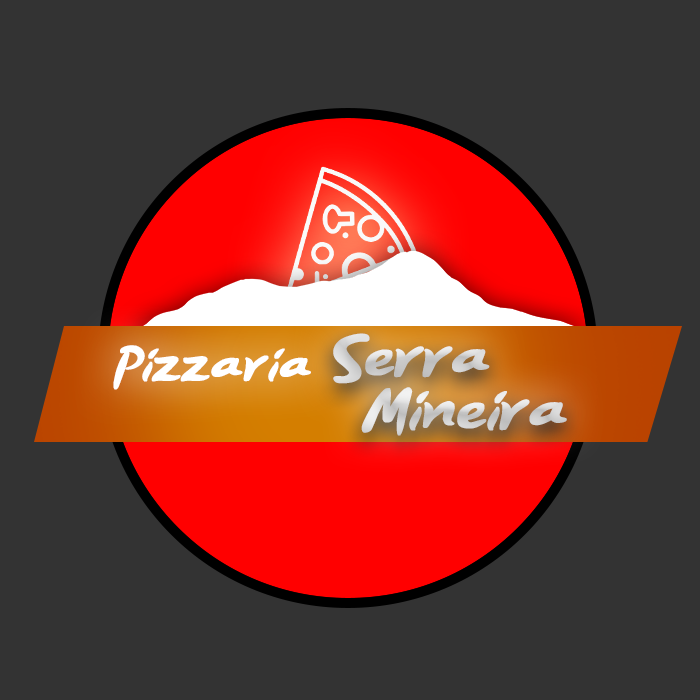
<style>
.page{position:relative;width:700px;height:700px;background:#333333}
.page>*{position:absolute;margin:0}
.t1{font:30px/53px "OrderPizza";letter-spacing:0.075em;color:#d3d3d3;font-weight:bold}
.t2{font:25px "OrderPizza";letter-spacing:0.075em;color:#fefefe;font-weight:bold}
</style>
<div class="page">
<p class="t1" style="left:333px;top:333px;width:234px;height:103px;text-align:center">Serra<br>   Mineira</p>
<p class="t2" style="left:113px;top:345px;width:198px;height:45px;text-align:center">Pizzaria</p>
</div>
